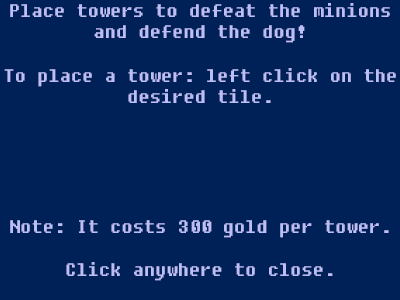
<style>
.page{position:relative;width:400px;height:300px;background:#002157}
.page>*{position:absolute;margin:0}
.t1{font:18px "Fixedsys";color:#bebef6}
</style>
<div class="page">
<p class="t1" style="left:4px;top:3px;width:392px;height:278px;text-align:center">Place towers to defeat the minions and defend the dog!<br><br>To place a tower: left click on the desired tile.<br><br><br><br><br><br>Note: It costs 300 gold per tower.<br><br>Click anywhere to close.</p>
</div>
